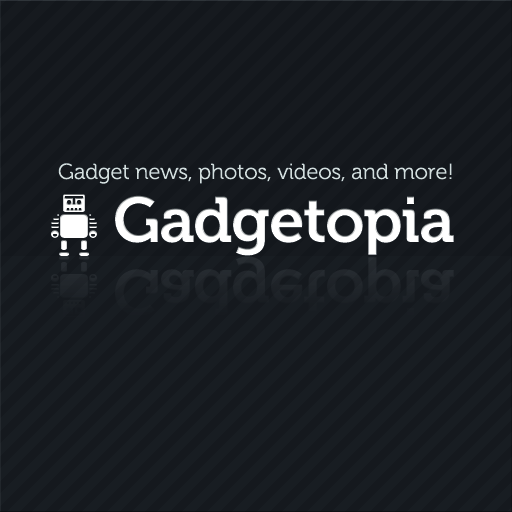
<style>
.page{position:relative;width:512px;height:512px;background:#181d22}
.page>*{position:absolute;margin:0}
.t1{font:22px "Museo300-Regular";letter-spacing:-0.01em;color:#d3dedd}
</style>
<div class="page">
<p class="t1" style="left:58px;top:163px;width:394px;height:21px">Gadget news, photos, videos, and more!</p>
</div>
